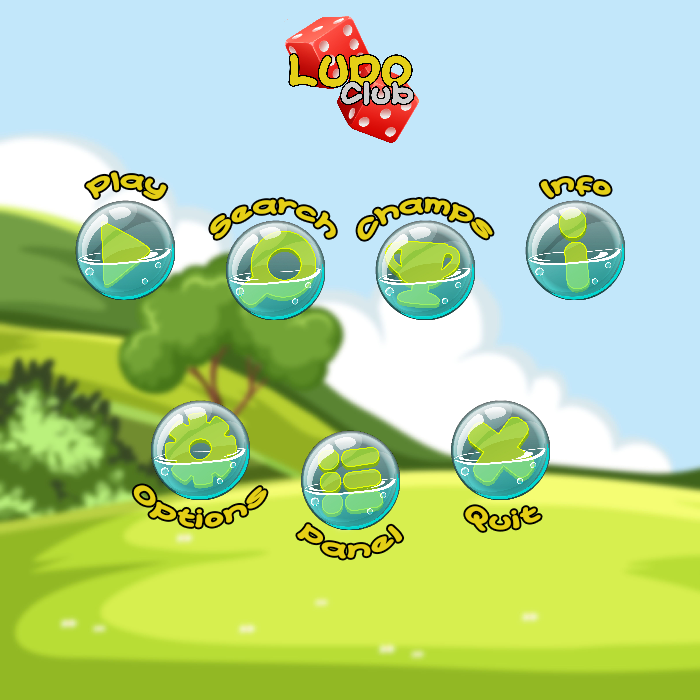
<style>
.page{position:relative;width:700px;height:700px;background:#c2e7fa}
.page>*{position:absolute;margin:0}
.t1{font:26px "CARTOONIC";color:#e5cf16}
</style>
<div class="page">
<p class="t1" style="left:86px;top:172px;width:81px;height:28px">Play</p>
<p class="t1" style="left:540px;top:177px;width:71px;height:21px">Info</p>
<p class="t1" style="left:357px;top:198px;width:136px;height:42px">Champs</p>
<p class="t1" style="left:210px;top:199px;width:126px;height:40px">Search</p>
<p class="t1" style="left:133px;top:485px;width:134px;height:43px">Options</p>
<p class="t1" style="left:465px;top:506px;width:76px;height:25px">Quit</p>
<p class="t1" style="left:297px;top:524px;width:106px;height:35px">Panel</p>
</div>
